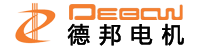
<style>
.page{position:relative;width:217px;height:46px;background:#ffffff}
.page>*{position:absolute;margin:0}
.t1{font:22px "MicrosoftYaHei";letter-spacing:0.4em;color:#000000;font-weight:bold}
</style>
<div class="page">
<p class="t1" style="left:67px;top:23px;width:117px;height:23px">德邦电机</p>
</div>
